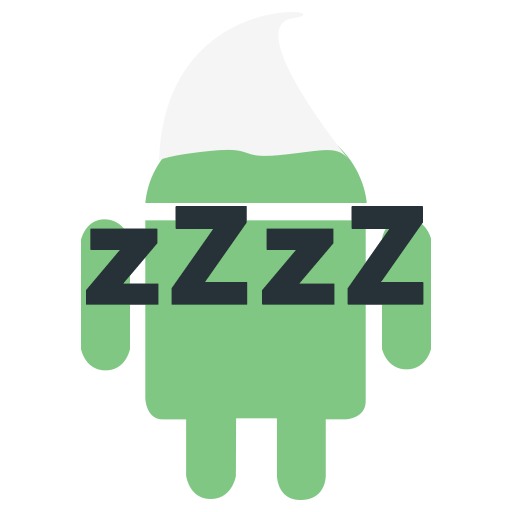
<style>
.page{position:relative;width:512px;height:512px;background:#ffffff}
.page>*{position:absolute;margin:0}
.t1{font:150px "SourceCodePro-Black";letter-spacing:-0.04em;color:#263238;font-weight:bold}
</style>
<div class="page">
<p class="t1" style="left:86px;top:206px;width:338px;height:99px">zZzZ</p>
</div>
